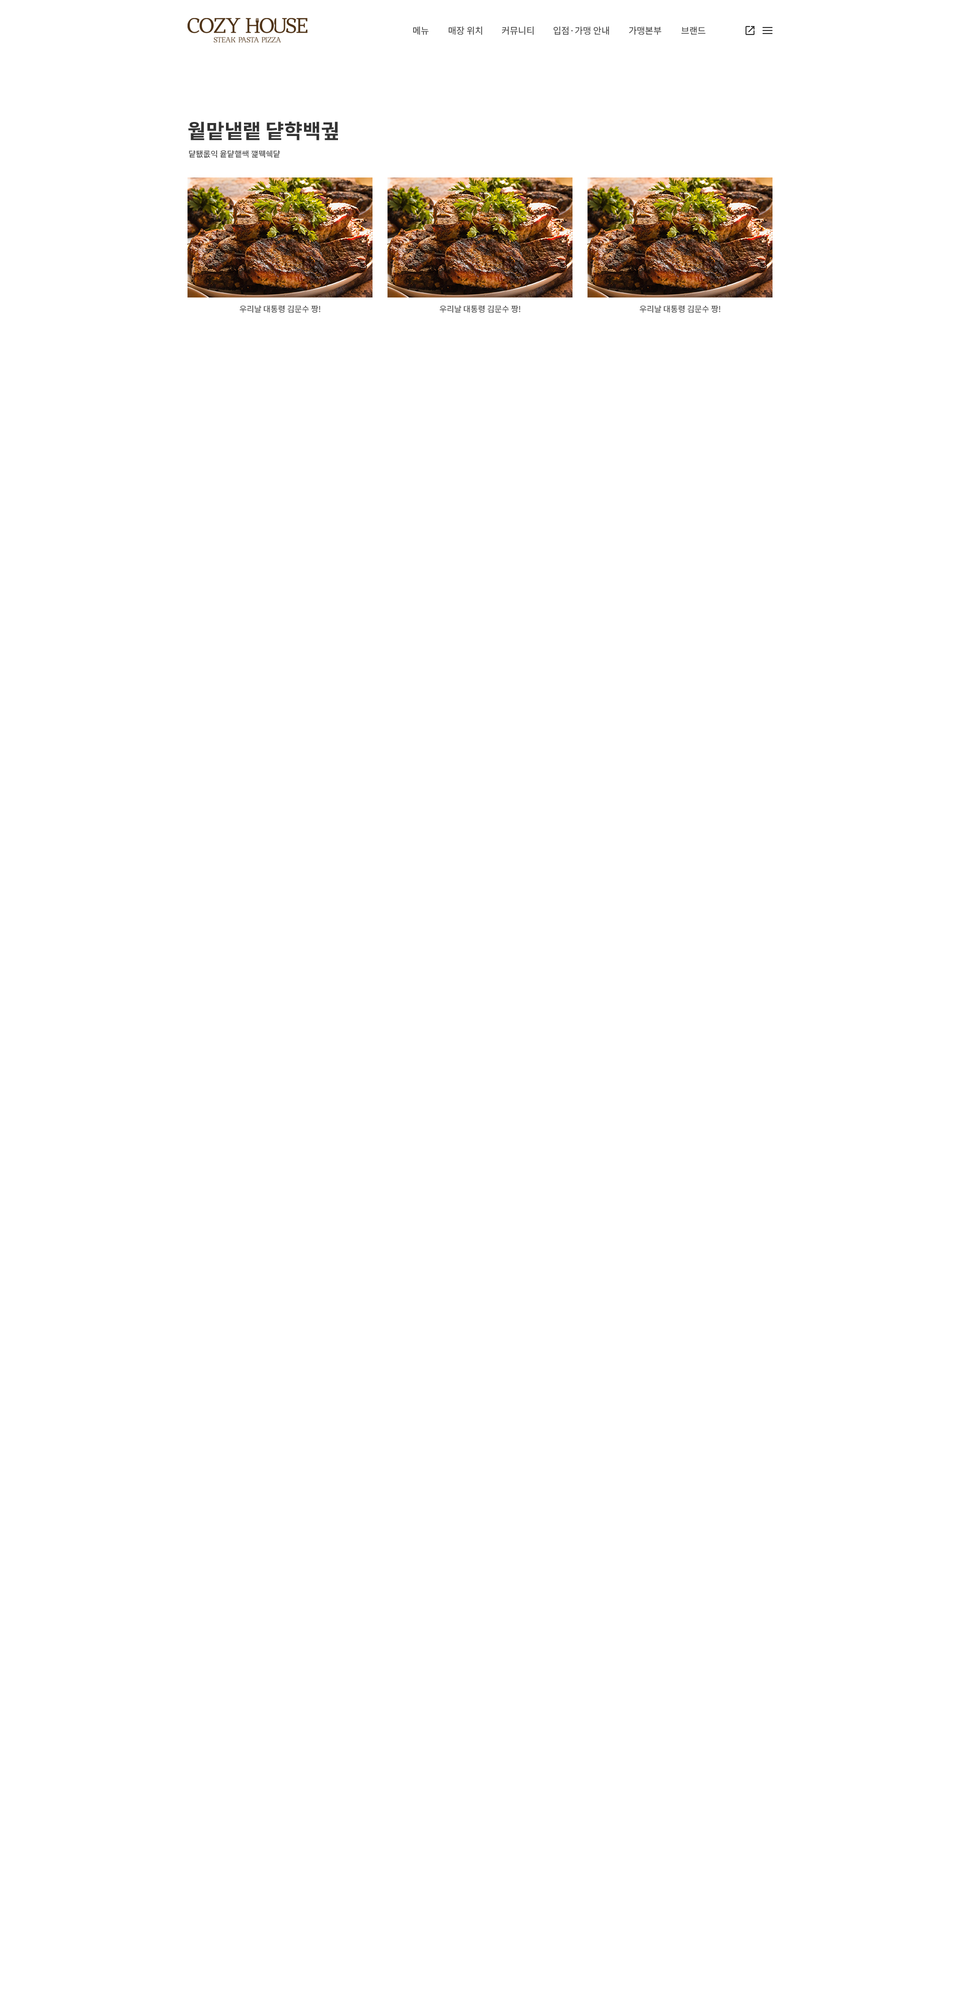
<style>
.page{position:relative;width:960px;height:2000px;background:#ffffff}
.page>*{position:absolute;margin:0}
.t1{font:9px "NotoSansKR-Regular";color:#333333}
.t2{font:20px "NotoSansKR-Bold";color:#333333}
.t3{font:8px "NotoSansKR-Regular";color:#333333}
</style>
<div class="page">
<p class="t1" style="left:413px;top:26px;width:15px;height:9px">메뉴</p>
<p class="t1" style="left:448px;top:26px;width:34px;height:9px">매장 위치</p>
<p class="t1" style="left:502px;top:26px;width:32px;height:9px">커뮤니티</p>
<p class="t1" style="left:554px;top:26px;width:55px;height:9px">입점·가맹 안내</p>
<p class="t1" style="left:629px;top:26px;width:33px;height:9px">가맹본부</p>
<p class="t1" style="left:681px;top:26px;width:25px;height:9px">브랜드</p>
<p class="t2" style="left:188px;top:122px;width:150px;height:18px">우리나라 대한민국</p>
<p class="t3" style="left:189px;top:150px;width:91px;height:8px">대통령은 위대하신 김문순대</p>
<p class="t3" style="left:240px;top:305px;width:80px;height:8px">우리날 대통령 김문수 짱!</p>
<p class="t3" style="left:440px;top:305px;width:80px;height:8px">우리날 대통령 김문수 짱!</p>
<p class="t3" style="left:640px;top:305px;width:80px;height:8px">우리날 대통령 김문수 짱!</p>
</div>
